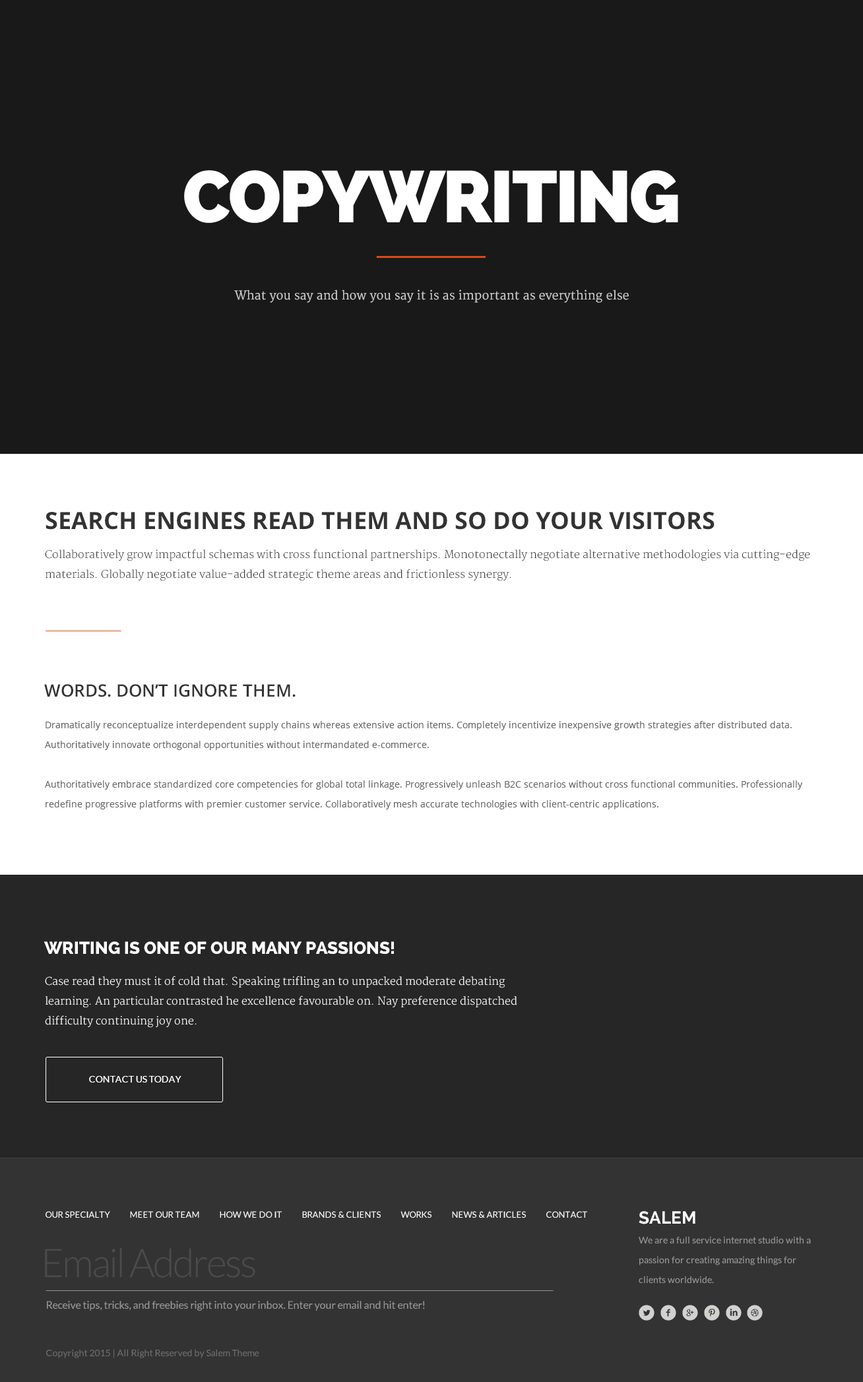
<style>
.page{position:relative;width:863px;height:1382px;background:#191919}
.page>*{position:absolute;margin:0}
.t1{font:72.6px "Raleway-Heavy";letter-spacing:-0.025em;color:#ffffff;text-transform:uppercase}
.t2{font:11.9px "Merriweather";color:#cccccc}
.t3{font:23.7px "OpenSans-Bold";color:#333333;text-transform:uppercase}
.t4{font:10.6px/19.8px "Merriweather-Light";color:#333333}
.t5{font:17.2px "OpenSans-Semibold";color:#333333;text-transform:uppercase}
.t6{font:9.2px/19.8px "OpenSans";color:#646464}
.t7{font:17.2px "Raleway-ExtraBold";color:#ffffff;text-transform:uppercase}
.t8{font:10.6px/19.8px "Merriweather-Light";color:#ffffff}
.t9{font:9.2px "Lato-Regular";color:#ffffff;text-transform:uppercase}
.t10{font:8.6px "Lato-Regular";color:#ffffff;text-transform:uppercase}
.t11{font:9.2px/19.8px "Lato-Regular";color:#999999}
.t12{font:17.2px/23.7px "Raleway-Bold";color:#ffffff}
.t13{font:39.6px "Lato-Light";letter-spacing:-0.05em;color:#4c4b4b}
.t14{font:10.6px "Lato-Regular";color:#999999}
.t15{font:9.2px "Lato-Regular";color:#6e6e6e}
</style>
<div class="page">
<p class="t1" style="left:184px;top:170px;width:494px;height:53px">COPYWRITING</p>
<p class="t2" style="left:234px;top:290px;width:395px;height:13px">What you say and how you say it is as important as everything else</p>
<p class="t3" style="left:46px;top:512px;width:668px;height:18px">search engines read them and so do your visitors</p>
<p class="t4" style="left:45px;top:549px;width:764px;height:32px">Collaboratively grow impactful schemas with cross functional partnerships. Monotonectally negotiate alternative methodologies via cutting-edge materials. Globally negotiate value-added strategic theme areas and frictionless synergy.</p>
<p class="t5" style="left:44px;top:684px;width:252px;height:13px">words. don’t ignore them.</p>
<p class="t6" style="left:45px;top:721px;width:758px;height:88px">Dramatically reconceptualize interdependent supply chains whereas extensive action items. Completely incentivize inexpensive growth strategies after distributed data. Authoritatively innovate orthogonal opportunities without intermandated e-commerce.<br><br>Authoritatively embrace standardized core competencies for global total linkage. Progressively unleash B2C scenarios without cross functional communities. Professionally redefine progressive platforms with premier customer service. Collaboratively mesh accurate technologies with client-centric applications.</p>
<p class="t7" style="left:44px;top:941px;width:350px;height:14px">writing is one of our many passions!</p>
<p class="t8" style="left:45px;top:976px;width:472px;height:52px">Case read they must it of cold that. Speaking trifling an to unpacked moderate debating learning. An particular contrasted he excellence favourable on. Nay preference dispatched difficulty continuing joy one.</p>
<p class="t9" style="left:89px;top:1076px;width:92px;height:7px">contact us today</p>
<p class="t10" style="left:46px;top:1211px;width:541px;height:7px">Our Specialty          Meet Our Team          How We Do It          Brands &amp; Clients          Works          News &amp; Articles          Contact</p>
<p class="t11" style="left:639px;top:1211px;width:172px;height:72px"><span class="t12">SALEM<br></span>We are a full service internet studio with a passion for creating amazing things for clients worldwide.</p>
<p class="t13" style="left:45px;top:1248px;width:210px;height:30px">Email Address</p>
<p class="t14" style="left:47px;top:1301px;width:378px;height:10px">Receive tips, tricks, and freebies right into your inbox. Enter your email and hit enter!</p>
<p class="t15" style="left:46px;top:1349px;width:213px;height:9px">Copyright 2015 | All Right Reserved by Salem Theme</p>
</div>
